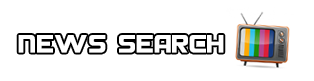
<style>
.page{position:relative;width:314px;height:81px;background:#ffffff}
.page>*{position:absolute;margin:0}
.t1{font:22px "HyundaiNormal";letter-spacing:0.025em;color:#ffffff;scale:0.95 1}
</style>
<div class="page">
<p class="t1" style="left:18px;top:35px;width:206px;height:18px">News Search</p>
</div>
